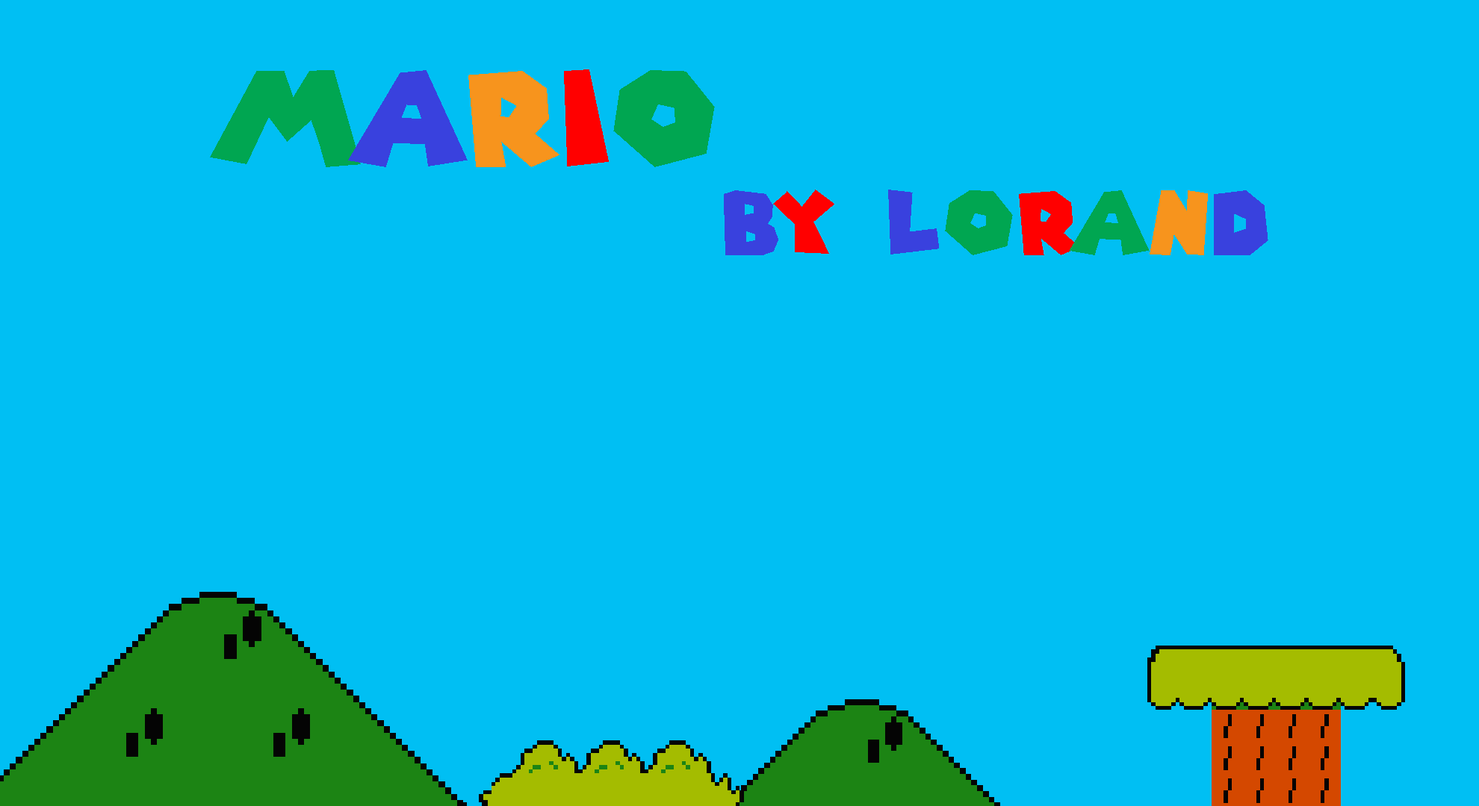
<style>
.page{position:relative;width:1479px;height:806px;background:#00bff3}
.page>*{position:absolute;margin:0}
.t1{font:130.7px "SuperMarioGalaxy";letter-spacing:0.05em;color:#00a651}
.t2{font:130.7px "SuperMarioGalaxy";letter-spacing:0.05em;color:#3941de}
.t3{font:130.7px "SuperMarioGalaxy";letter-spacing:0.05em;color:#f7941d}
.t4{font:130.7px "SuperMarioGalaxy";letter-spacing:0.05em;color:#ff0000}
.t5{font:87.4px "SuperMarioGalaxy";letter-spacing:0.05em;color:#3941de}
.t6{font:87.4px "SuperMarioGalaxy";letter-spacing:0.05em;color:#ff0000}
.t7{font:87.4px "SuperMarioGalaxy";letter-spacing:0.05em;color:#00a651}
.t8{font:87.4px "SuperMarioGalaxy";letter-spacing:0.05em;color:#f7941d}
</style>
<div class="page">
<p class="t1" style="left:210px;top:69px;width:505px;height:98px">M<span class="t2">a</span><span class="t3">r</span><span class="t4">i</span>o</p>
<p class="t5" style="left:724px;top:190px;width:544px;height:65px">b<span class="t6">y </span>L<span class="t7">o</span><span class="t6">r</span><span class="t7">a</span><span class="t8">n</span>d</p>
</div>
